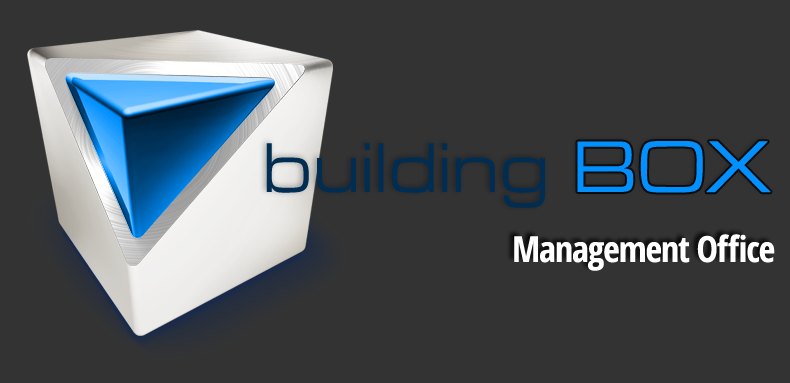
<style>
.page{position:relative;width:790px;height:383px;background:#333333}
.page>*{position:absolute;margin:0}
.t1{font:68.7px "BrinkExtended";letter-spacing:-0.03em;color:#002d51}
.t2{font:72px "BrinkExtended";letter-spacing:-0.03em;color:#0090ff}
.t3{font:36px "OpenSans-CondensedBold";letter-spacing:-0.03em;color:#ffffff}
</style>
<div class="page">
<p class="t1" style="left:266px;top:143px;width:279px;height:65px">building</p>
<p class="t2" style="left:577px;top:141px;width:194px;height:52px">BOX</p>
<p class="t3" style="left:514px;top:234px;width:261px;height:37px">Management Office</p>
</div>
